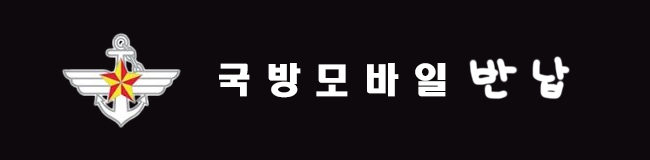
<style>
.page{position:relative;width:650px;height:160px;background:#0e090d}
.page>*{position:absolute;margin:0}
.t1{font:35px "HeadlineR-HM";letter-spacing:0.4em;color:#ffffff}
</style>
<div class="page">
<p class="t1" style="left:219px;top:63px;width:227px;height:35px">국방모바일</p>
</div>
